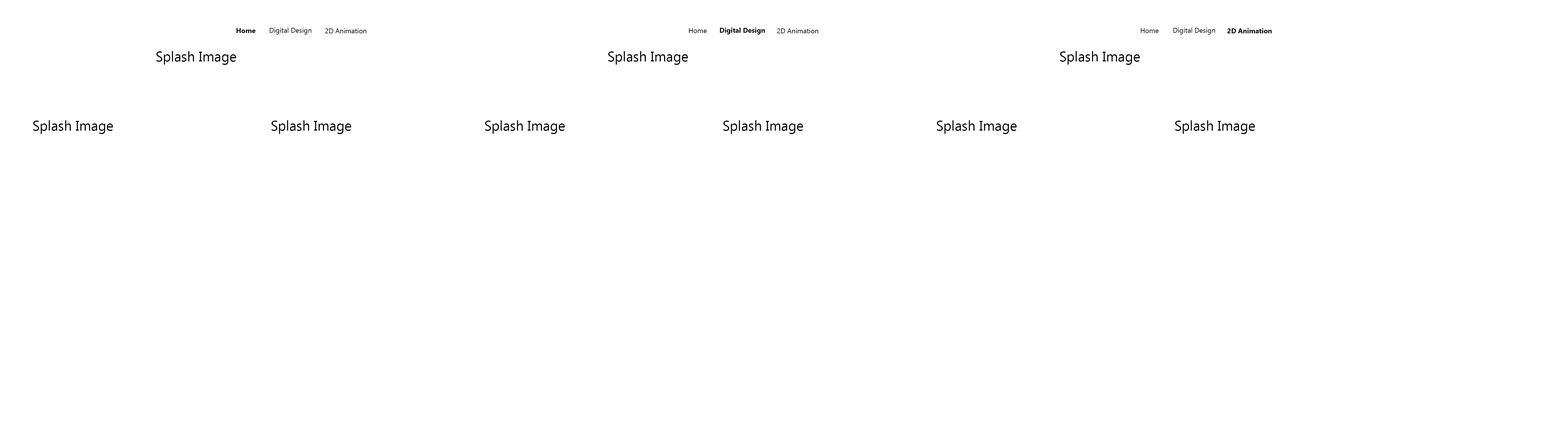
<style>
.page{position:relative;width:1568px;height:441px;background:#ffffff}
.page>*{position:absolute;margin:0}
.t1{font:6.9px "Ebrima-Bold";color:#000200}
.t2{font:6.9px "Ebrima";color:#000200}
.t3{font:13.8px "Ebrima";color:#000200}
</style>
<div class="page">
<p class="t1" style="left:236px;top:28px;width:19px;height:5px">Home</p>
<p class="t2" style="left:270px;top:28px;width:41px;height:6px">Digital Design</p>
<p class="t2" style="left:325px;top:28px;width:41px;height:5px">2D Animation</p>
<p class="t2" style="left:689px;top:28px;width:18px;height:5px">Home</p>
<p class="t1" style="left:720px;top:28px;width:45px;height:6px">Digital Design</p>
<p class="t2" style="left:777px;top:28px;width:41px;height:5px">2D Animation</p>
<p class="t2" style="left:1141px;top:28px;width:18px;height:5px">Home</p>
<p class="t2" style="left:1173px;top:28px;width:42px;height:6px">Digital Design</p>
<p class="t1" style="left:1227px;top:28px;width:45px;height:5px">2D Animation</p>
<p class="t3" style="left:156px;top:51px;width:80px;height:14px">Splash Image</p>
<p class="t3" style="left:608px;top:51px;width:80px;height:14px">Splash Image</p>
<p class="t3" style="left:1060px;top:51px;width:80px;height:14px">Splash Image</p>
<p class="t3" style="left:33px;top:120px;width:80px;height:14px">Splash Image</p>
<p class="t3" style="left:271px;top:120px;width:80px;height:14px">Splash Image</p>
<p class="t3" style="left:485px;top:120px;width:80px;height:14px">Splash Image</p>
<p class="t3" style="left:723px;top:120px;width:80px;height:14px">Splash Image</p>
<p class="t3" style="left:937px;top:120px;width:80px;height:14px">Splash Image</p>
<p class="t3" style="left:1175px;top:120px;width:80px;height:14px">Splash Image</p>
</div>
